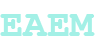
<style>
.page{position:relative;width:100px;height:50px;background:#ffffff}
.page>*{position:absolute;margin:0}
.t1{font:38.9px "CourierNewPS-BoldMT";color:#a3f0e6}
</style>
<div class="page">
<p class="t1" style="left:0px;top:14px;width:95px;height:22px">EAEM</p>
</div>
